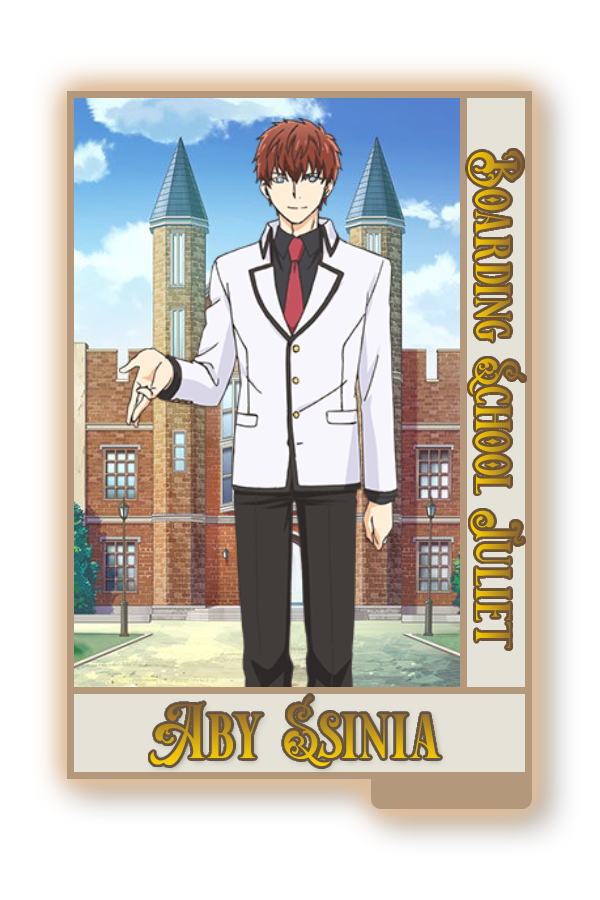
<style>
.page{position:relative;width:600px;height:900px;background:#ffffff}
.page>*{position:absolute;margin:0}
.t1{font:58.9px "VictorianDecadeDemoVersion"}
.t2{font:75px "VictorianDecadeDemoVersion"}
</style>
<div class="page">
<p class="t1" style="left:468px;top:150px;width:57px;height:498px;rotate:90deg">Boarding School Juliet</p>
<p class="t2" style="left:149px;top:695px;width:292px;height:72px">Aby Ssinia</p>
</div>
